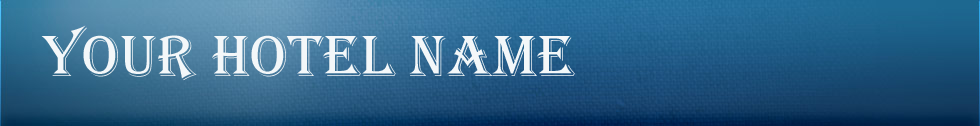
<style>
.page{position:relative;width:980px;height:126px}
.page>*{position:absolute;margin:0}
.t1{font:60px "Algerian";letter-spacing:0.01em;color:#f3f7f9;text-transform:uppercase}
</style>
<div class="page">
<p class="t1" style="left:41px;top:25px;width:534px;height:56px">your hotel name</p>
</div>
